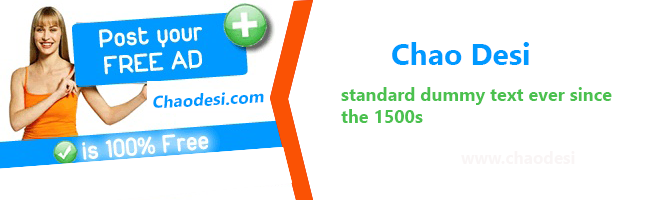
<style>
.page{position:relative;width:650px;height:200px;background:#ffffff}
.page>*{position:absolute;margin:0}
.t1{font:30px "NirmalaUI-Bold";color:#0099ff}
.t2{font:18px "NirmalaUI-Bold";color:#4bc14f}
.t3{font:17px "NirmalaUI-Bold";color:#0099ff}
.t4{font:17px "NirmalaUI-Bold";color:#f9f5f5}
</style>
<div class="page">
<p class="t1" style="left:392px;top:42px;width:137px;height:23px">Chao Desi</p>
<p class="t2" style="left:341px;top:87px;width:271px;height:36px">standard dummy text ever since the 1500s</p>
<p class="t3" style="left:153px;top:92px;width:111px;height:16px;rotate:-3deg">Chaodesi.com</p>
<p class="t4" style="left:461px;top:151px;width:114px;height:13px">www.chaodesi</p>
</div>
